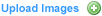
<style>
.page{position:relative;width:102px;height:16px;background:#ffffff}
.page>*{position:absolute;margin:0}
.t1{font:11px "Arial-BoldMT";color:#3399ff}
</style>
<div class="page">
<p class="t1" style="left:1px;top:4px;width:78px;height:11px">Upload Images</p>
</div>
